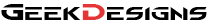
<style>
.page{position:relative;width:208px;height:23px;background:#ffffff}
.page>*{position:absolute;margin:0}
.t1{font:23.2px "MODERNWARFARE";color:#000000}
.t2{font:30px "MODERNWARFARE";color:#000000}
.t3{font:30px "MODERNWARFARE";color:#e53637}
</style>
<div class="page">
<p class="t1" style="left:1px;top:4px;width:206px;height:16px"><span class="t2">G</span>eek<span class="t3">D</span>esigns</p>
</div>
